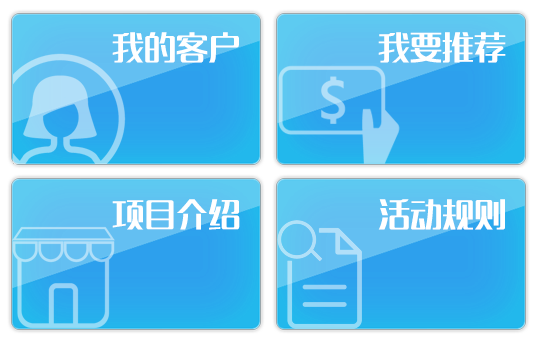
<style>
.page{position:relative;width:534px;height:338px}
.page>*{position:absolute;margin:0}
.t1{font:32px "MFLangQian_Noncommercial-Regular";color:#ffffff}
</style>
<div class="page">
<p class="t1" style="left:112px;top:32px;width:127px;height:31px">我的客户</p>
<p class="t1" style="left:378px;top:32px;width:128px;height:31px">我要推荐</p>
<p class="t1" style="left:112px;top:199px;width:128px;height:31px">项目介绍</p>
<p class="t1" style="left:378px;top:199px;width:127px;height:31px">活动规则</p>
</div>
